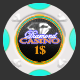
<style>
.page{position:relative;width:80px;height:80px;background:#333333}
.page>*{position:absolute;margin:0}
.t1{font:10.8px/3.6px "EdwardianScriptITC";color:#fda047}
.t2{font:6.3px/5.4px "Castellar";color:#fda047;scale:1.5 1}
.t3{font:10.6px "BernardMT-Condensed";color:#e19012;scale:1.22 1}
</style>
<div class="page">
<p class="t1" style="left:19px;top:30px;width:41px;height:14px;text-align:justify">Diamond<br><span class="t2">CASINO</span></p>
<p class="t3" style="left:34px;top:45px;width:12px;height:10px">1$</p>
</div>
